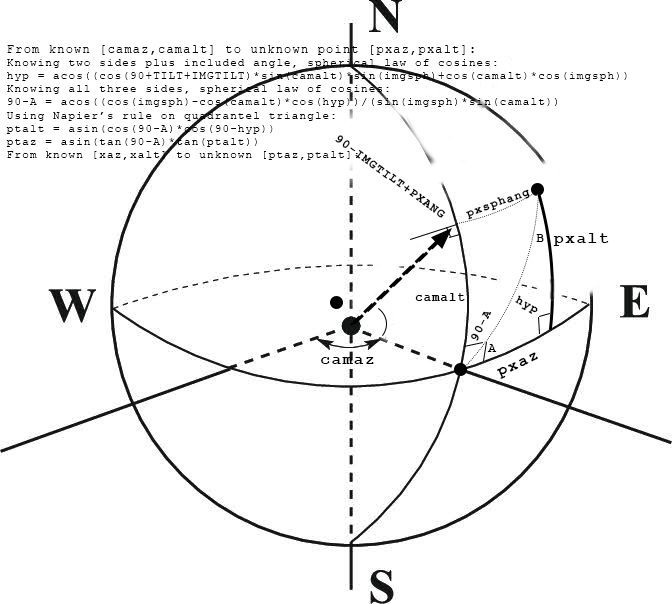
<style>
.page{position:relative;width:672px;height:604px;background:#ffffff}
.page>*{position:absolute;margin:0}
.t1{font:11px "CourierNewPSMT";letter-spacing:0.1em;color:#000000}
.t2{font:12px "CourierNewPSMT";letter-spacing:0.1em;color:#000000}
.t3{font:12px "CourierNewPS-BoldMT";letter-spacing:0.1em;color:#000000}
.t4{font:16px "CourierNewPS-BoldMT";letter-spacing:0.1em;color:#000000}
</style>
<div class="page">
<p class="t1" style="left:6px;top:45px;width:621px;height:115px"><span class="t2">From known [camaz,camalt] to unknown point [pxaz,pxalt]:<br></span>Knowing two sides plus included angle, spherical law of cosines:<br>hyp = acos((cos(90+TILT+IMGTILT)*sin(camalt)*sin(imgsph)+cos(camalt)*cos(imgsph))<br>Knowing all three sides, spherical law of cosines:<br>90-A = acos((cos(imgsph)-cos(camalt)*cos(hyp))/(sin(imgsph)*sin(camalt))<br>Using Napier’s rule on quadrantel triangle:<br>ptalt = asin(cos(90-A)*cos(90-hyp))<br>ptaz = asin(tan(90-A)*tan(ptalt))<br>From known [xaz,xalt] to unknown [ptaz,ptalt]:</p>
<p class="t3" style="left:335px;top:135px;width:111px;height:83px;rotate:36deg">90-IMGTILT+PXANG</p>
<p class="t3" style="left:466px;top:189px;width:64px;height:31px;rotate:-20deg">pxsphang</p>
<p class="t4" style="left:553px;top:233px;width:56px;height:13px">pxalt</p>
<p class="t3" style="left:536px;top:234px;width:8px;height:8px">B</p>
<p class="t3" style="left:415px;top:293px;width:50px;height:8px">camalt</p>
<p class="t3" style="left:515px;top:295px;width:23px;height:19px;rotate:28deg">hyp</p>
<p class="t3" style="left:471px;top:311px;width:21px;height:30px;rotate:-64deg">90-A</p>
<p class="t3" style="left:487px;top:344px;width:10px;height:8px">A</p>
<p class="t4" style="left:497px;top:352px;width:41px;height:27px;rotate:-24deg">pxaz</p>
<p class="t4" style="left:321px;top:357px;width:53px;height:7px">camaz</p>
</div>
